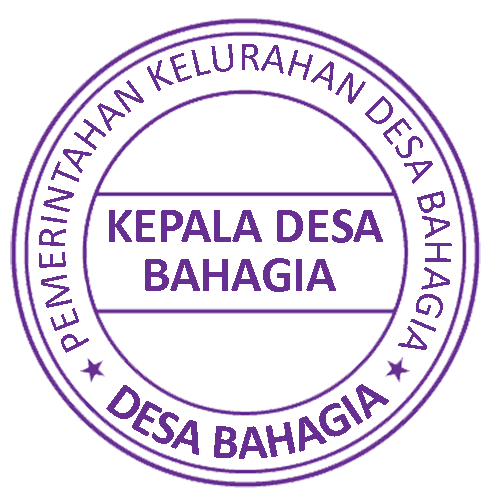
<style>
.page{position:relative;width:500px;height:500px;background:#ffffff}
.page>*{position:absolute;margin:0}
.t1{font:42px "Calibri";color:#672f92}
.t2{font:50px "Calibri-Bold";color:#672f92}
</style>
<div class="page">
<p class="t1" style="left:39px;top:44px;width:413px;height:309px">PEMERINTAHAN KELURAHAN DESA BAHAGIA</p>
<p class="t2" style="left:109px;top:209px;width:274px;height:34px">KEPALA DESA</p>
<p class="t2" style="left:145px;top:258px;width:191px;height:34px">BAHAGIA</p>
<p class="t2" style="left:106px;top:384px;width:283px;height:75px">DESA BAHAGIA</p>
</div>
